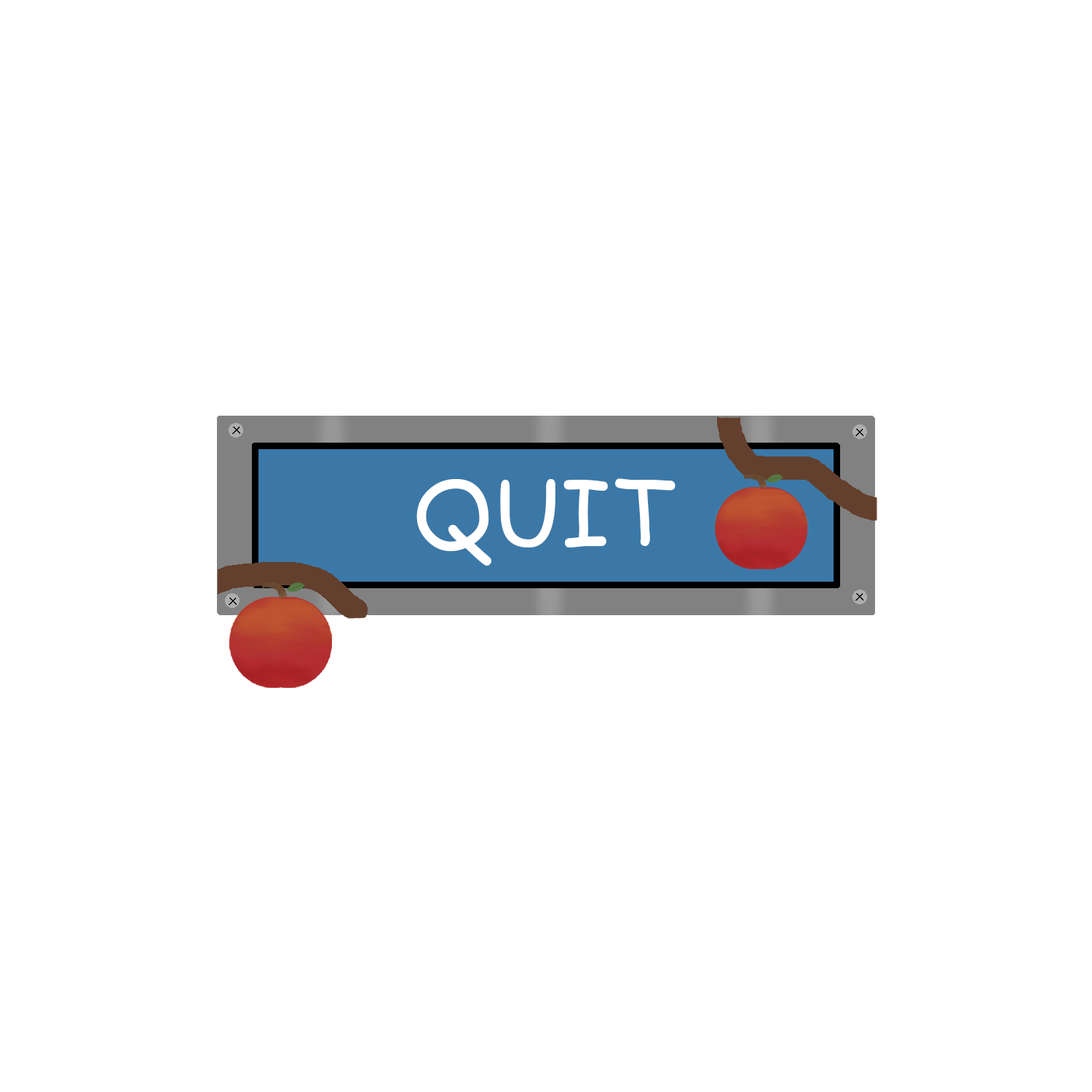
<style>
.page{position:relative;width:1092px;height:1092px;background:#ffffff}
.page>*{position:absolute;margin:0}
.t1{font:91px "ComicSansMS";color:#ffffff}
</style>
<div class="page">
<p class="t1" style="left:416px;top:478px;width:260px;height:88px">QUIT</p>
</div>
